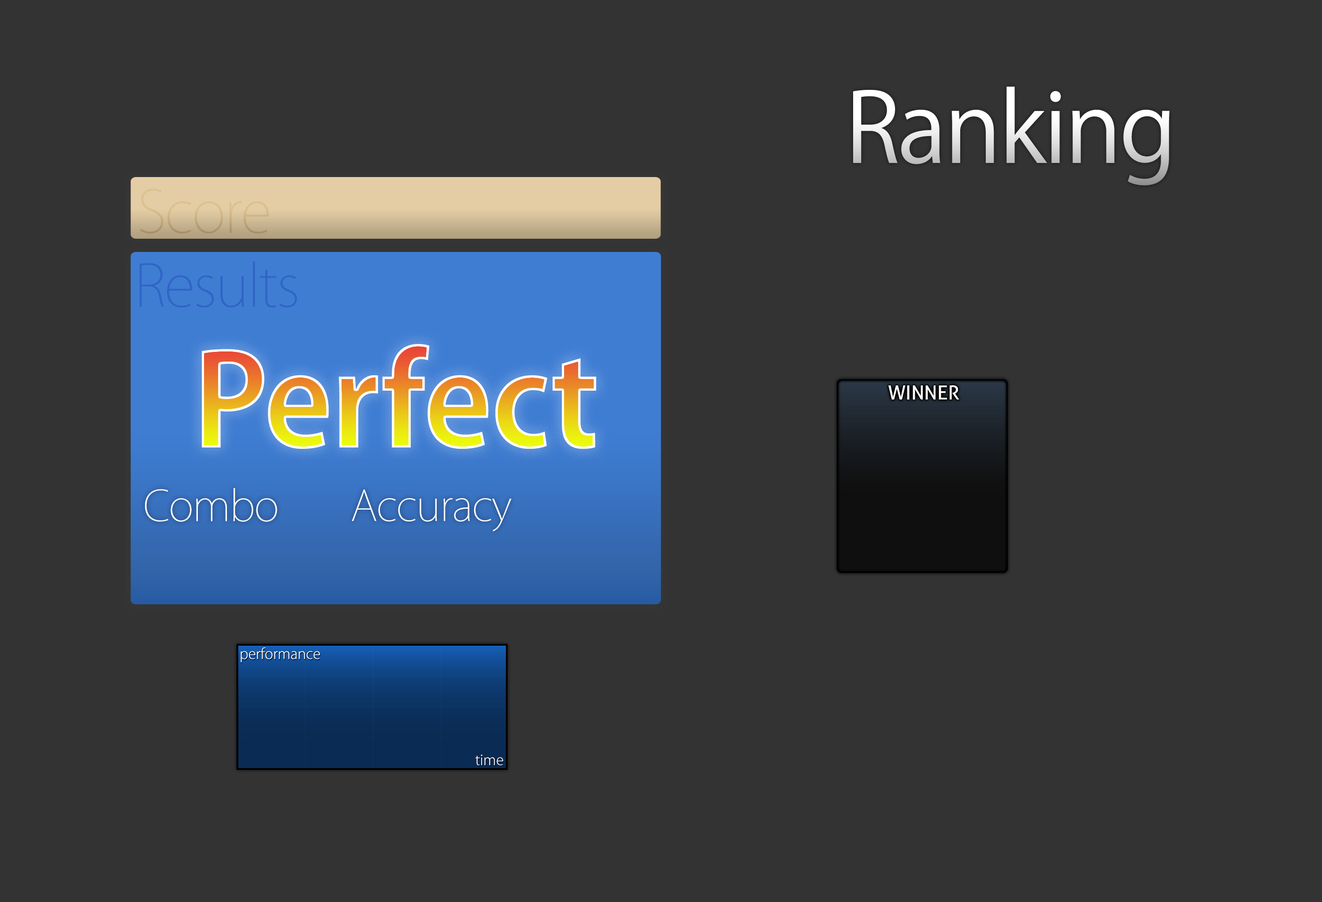
<style>
.page{position:relative;width:1322px;height:902px;background:#333333}
.page>*{position:absolute;margin:0}
.t1{font:95.2px "KozGoPr6N-Regular";letter-spacing:-0.025em;color:#ececec}
.t2{font:57.2px "KozGoPr6N-ExtraLight";letter-spacing:-0.025em}
.t3{font:57.2px "KozGoPr6N-ExtraLight";letter-spacing:-0.025em;color:#3164c7}
.t4{font:126.9px "KozGoPr6N-Bold"}
.t5{font:19.4px "Aller";color:#fefefe}
.t6{font:41.7px "KozGoPr6N-ExtraLight";letter-spacing:-0.025em;color:#ffffff}
.t7{font:14.1px "KozGoPr6N-Light";color:#ffffff}
</style>
<div class="page">
<p class="t1" style="left:853px;top:86px;width:316px;height:99px">Ranking</p>
<p class="t2" style="left:140px;top:189px;width:129px;height:44px">Score</p>
<p class="t3" style="left:139px;top:261px;width:158px;height:47px">Results</p>
<p class="t4" style="left:202px;top:344px;width:394px;height:105px">Perfect</p>
<p class="t5" style="left:888px;top:385px;width:71px;height:15px">WINNER</p>
<p class="t6" style="left:145px;top:488px;width:132px;height:34px">Combo</p>
<p class="t6" style="left:352px;top:489px;width:159px;height:43px">Accuracy</p>
<p class="t7" style="left:241px;top:648px;width:79px;height:15px">performance</p>
<p class="t7" style="left:475px;top:755px;width:28px;height:11px">time</p>
</div>
